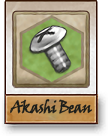
<style>
.page{position:relative;width:108px;height:136px}
.page>*{position:absolute;margin:0}
.t1{font:16px "VinerHandITC";letter-spacing:-0.08em;color:#1c1e1b;font-weight:bold;scale:0.9 1}
</style>
<div class="page">
<p class="t1" style="left:10px;top:99px;width:83px;height:15px">Akashi Bean</p>
</div>
